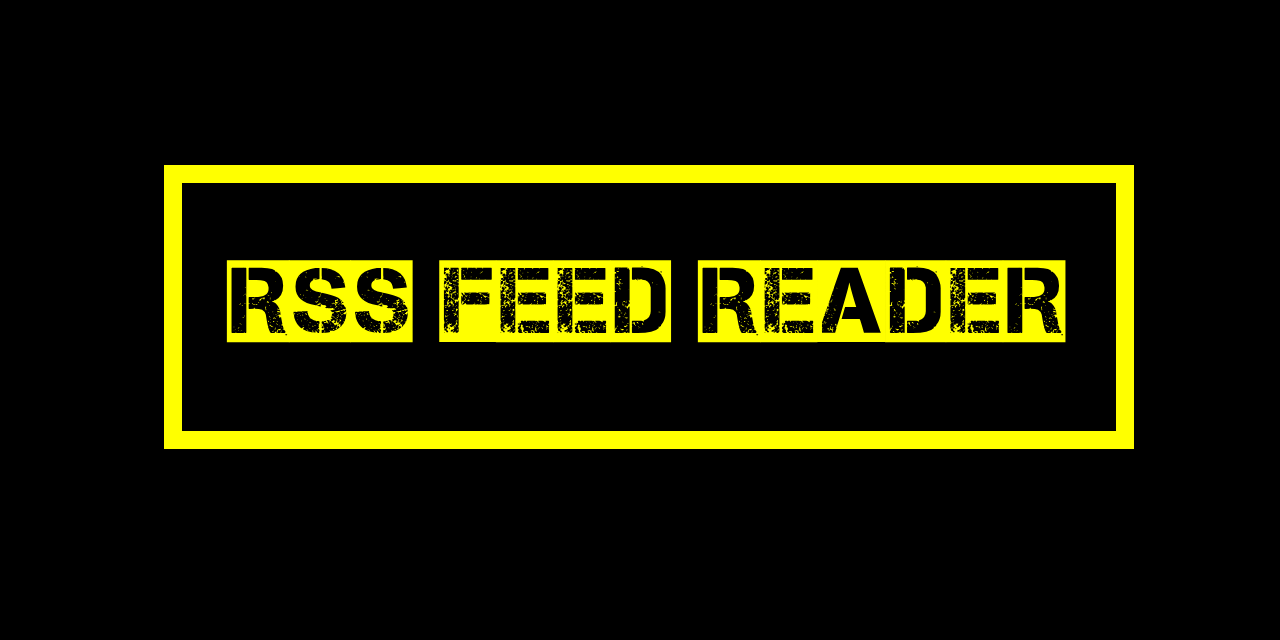
<style>
.page{position:relative;width:1280px;height:640px;background:#000000}
.page>*{position:absolute;margin:0}
.t1{font:93px "Captureit2";color:#ffff00}
</style>
<div class="page">
<p class="t1" style="left:226px;top:260px;width:840px;height:83px">RSS Feed Reader</p>
</div>
